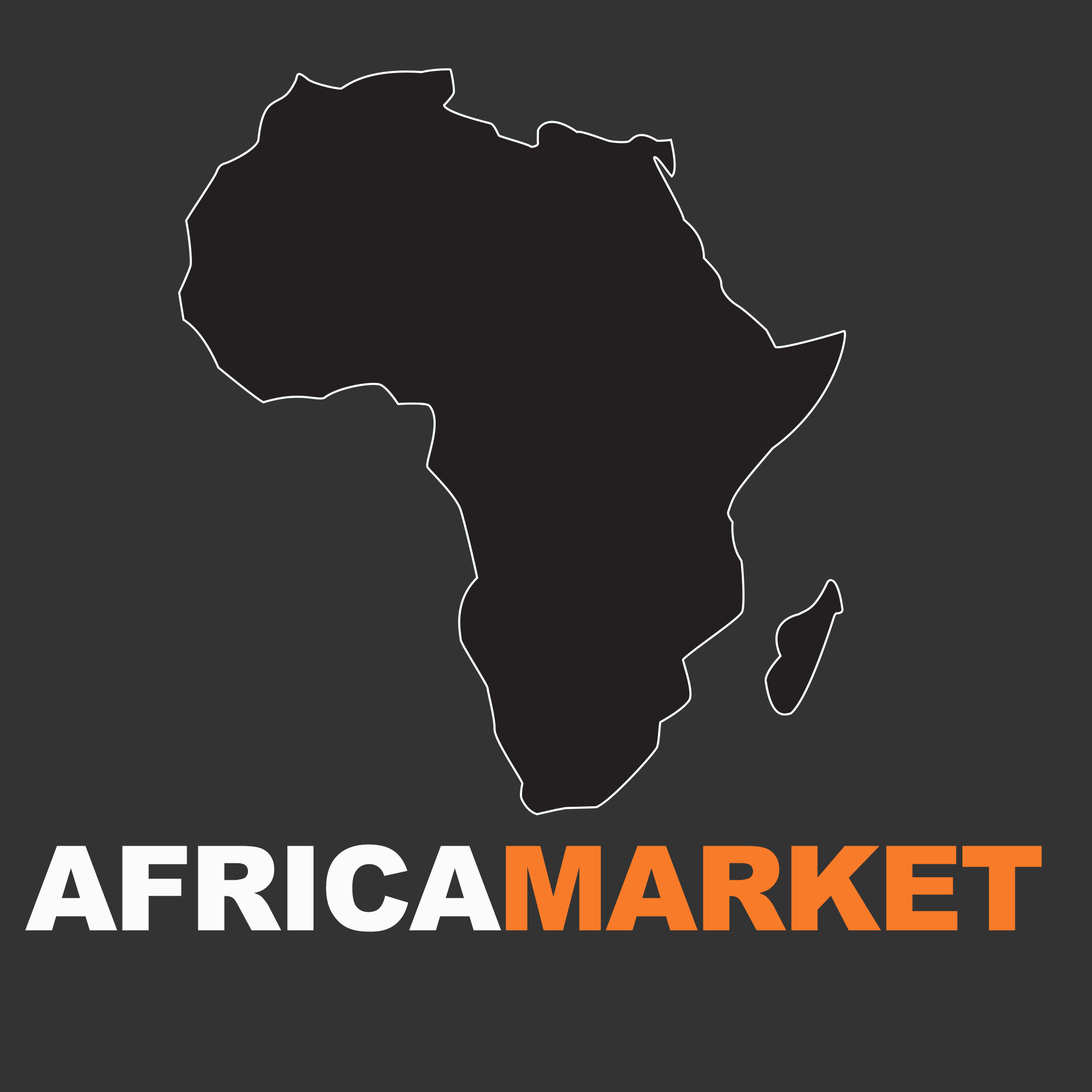
<style>
.page{position:relative;width:1092px;height:1092px;background:#333333}
.page>*{position:absolute;margin:0}
.t1{font:117.6px "Arial-Black";letter-spacing:-0.025em;color:#fcfbfc}
.t2{font:117.6px "Arial-Black";letter-spacing:-0.025em;color:#f87b29}
</style>
<div class="page">
<p class="t1" style="left:25px;top:844px;width:1017px;height:88px">AFRICA<span class="t2">MARKET</span></p>
</div>
